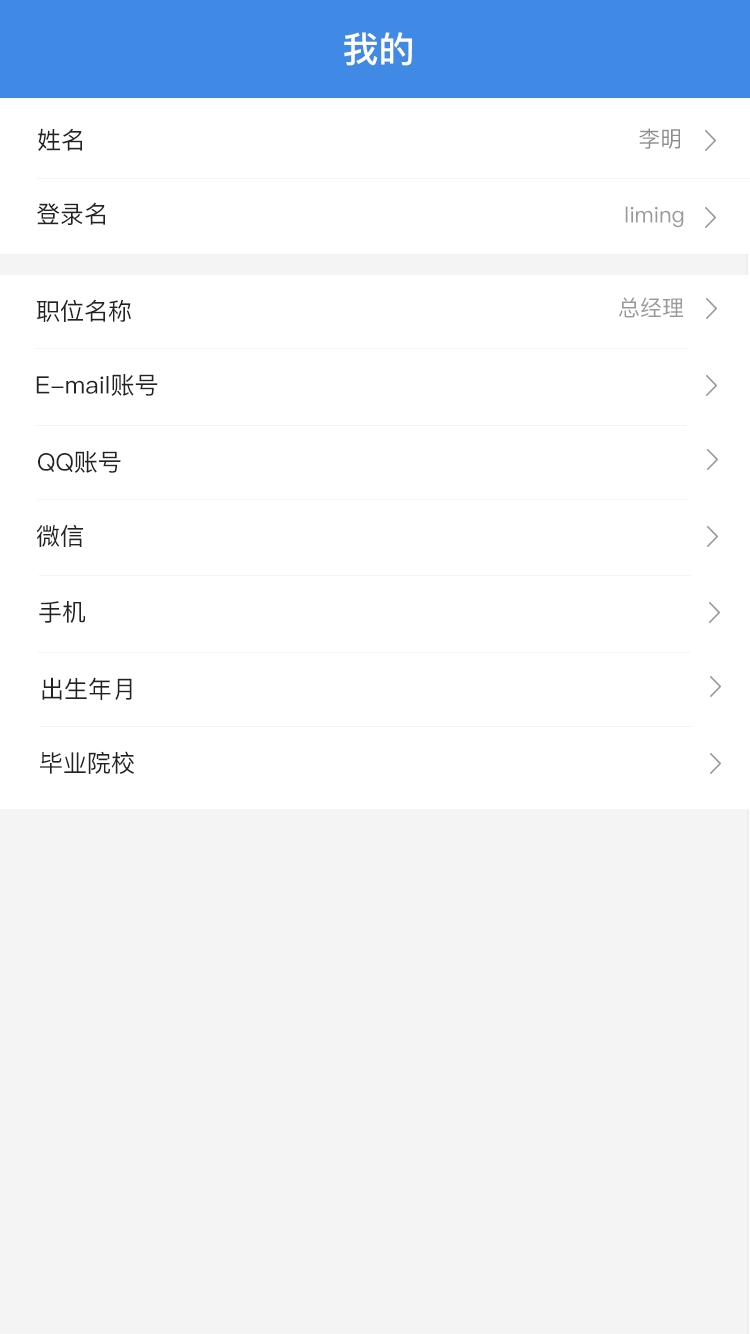
<style>
.page{position:relative;width:750px;height:1334px;background:#ffffff}
.page>*{position:absolute;margin:0}
.t1{font:36px "PingFangSC-Medium";color:#ffffff}
.t2{font:24px "PingFangSC-Regular";color:#222222}
.t3{font:22px "PingFangSC-Regular";color:#8e8e8e}
.t4{font:22px "PingFangSC-Regular";color:#999999}
</style>
<div class="page">
<p class="t1" style="left:344px;top:32px;width:68px;height:34px">我的</p>
<p class="t2" style="left:38px;top:128px;width:44px;height:23px">姓名</p>
<p class="t3" style="left:639px;top:128px;width:41px;height:21px">李明</p>
<p class="t2" style="left:37px;top:202px;width:68px;height:23px">登录名</p>
<p class="t4" style="left:625px;top:206px;width:59px;height:22px">liming</p>
<p class="t2" style="left:37px;top:299px;width:94px;height:23px">职位名称</p>
<p class="t4" style="left:619px;top:297px;width:64px;height:21px">总经理</p>
<p class="t2" style="left:36px;top:374px;width:122px;height:22px">E-mail账号</p>
<p class="t2" style="left:38px;top:451px;width:83px;height:22px">QQ账号</p>
<p class="t2" style="left:36px;top:524px;width:47px;height:23px">微信</p>
<p class="t2" style="left:39px;top:601px;width:46px;height:22px">手机</p>
<p class="t2" style="left:42px;top:677px;width:90px;height:23px">出生年月</p>
<p class="t2" style="left:40px;top:751px;width:94px;height:23px">毕业院校</p>
</div>
